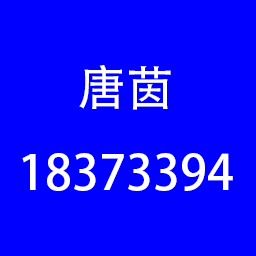
<style>
.page{position:relative;width:256px;height:256px;background:#0000ff}
.page>*{position:absolute;margin:0}
.t1{font:48px "AdobeHeitiStd-Regular";color:#ffffff}
</style>
<div class="page">
<p class="t1" style="left:22px;top:65px;width:211px;height:126px;text-align:center">唐茵<br>18373394</p>
</div>
